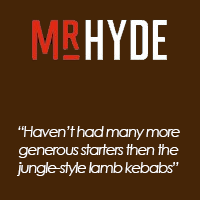
<style>
.page{position:relative;width:200px;height:200px;background:#452507}
.page>*{position:absolute;margin:0}
.t1{font:15px "CenturyGothic-Italic";letter-spacing:-0.075em;color:#ffffff}
</style>
<div class="page">
<p class="t1" style="left:17px;top:126px;width:163px;height:50px;text-align:center">“Haven’t had many more<br>generous starters then the<br>jungle-style lamb kebabs”</p>
</div>
